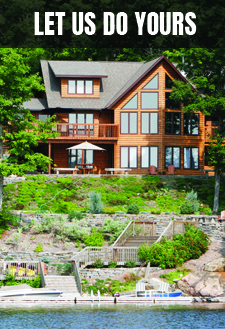
<style>
.page{position:relative;width:225px;height:329px}
.page>*{position:absolute;margin:0}
.t1{font:26.4px "Anton-Regular";color:#ffffff}
</style>
<div class="page">
<p class="t1" style="left:34px;top:12px;width:163px;height:23px">LET US DO YOURS</p>
</div>
